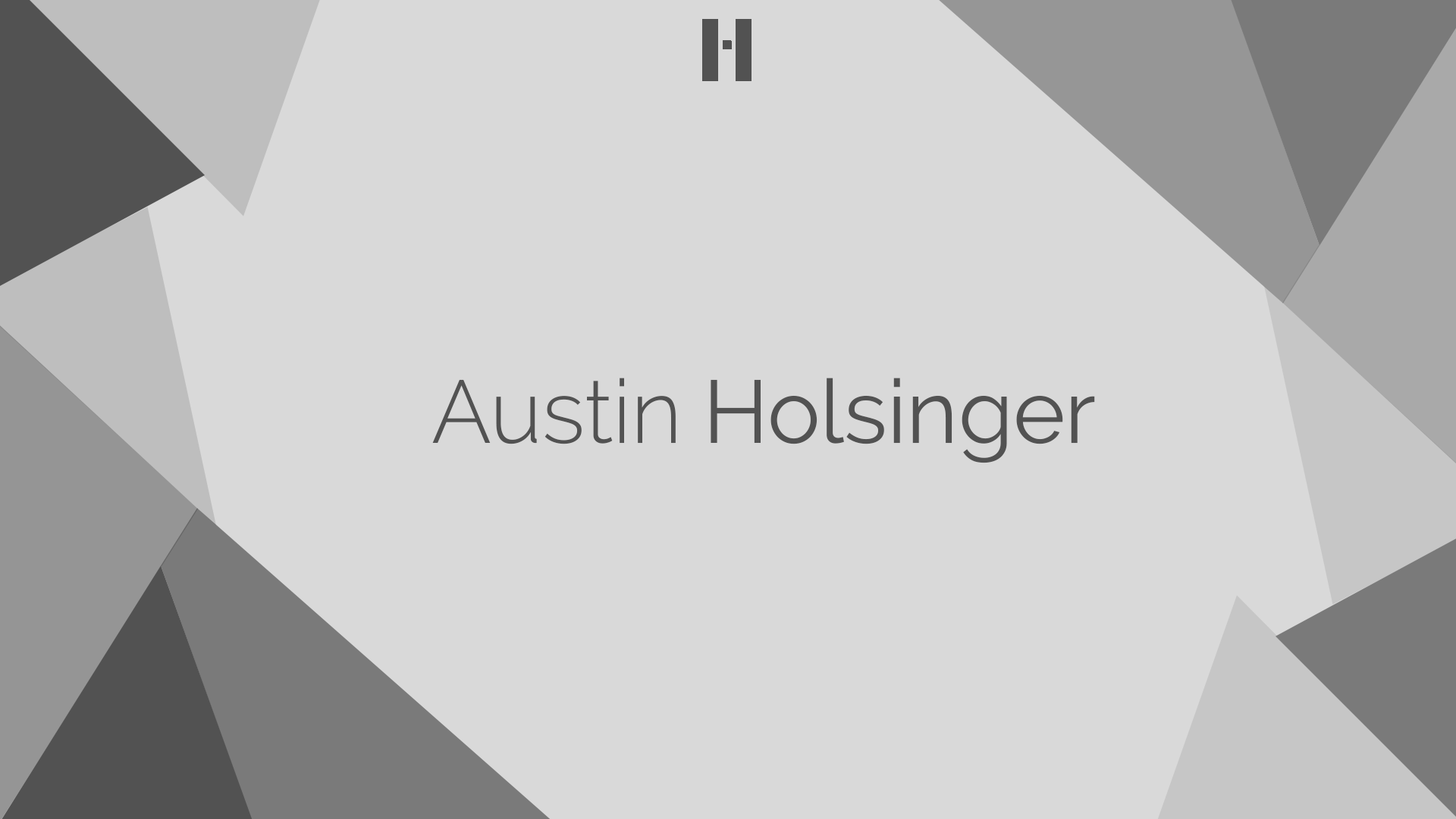
<style>
.page{position:relative;width:1456px;height:819px;background:#d9d9d9}
.page>*{position:absolute;margin:0}
.t1{font:88.5px "Raleway-Light";color:#525252}
.t2{font:88.5px "Raleway-Regular";color:#525252}
</style>
<div class="page">
<p class="t1" style="left:432px;top:378px;width:244px;height:66px">Austin</p>
<p class="t2" style="left:711px;top:378px;width:384px;height:85px">Holsinger</p>
</div>
